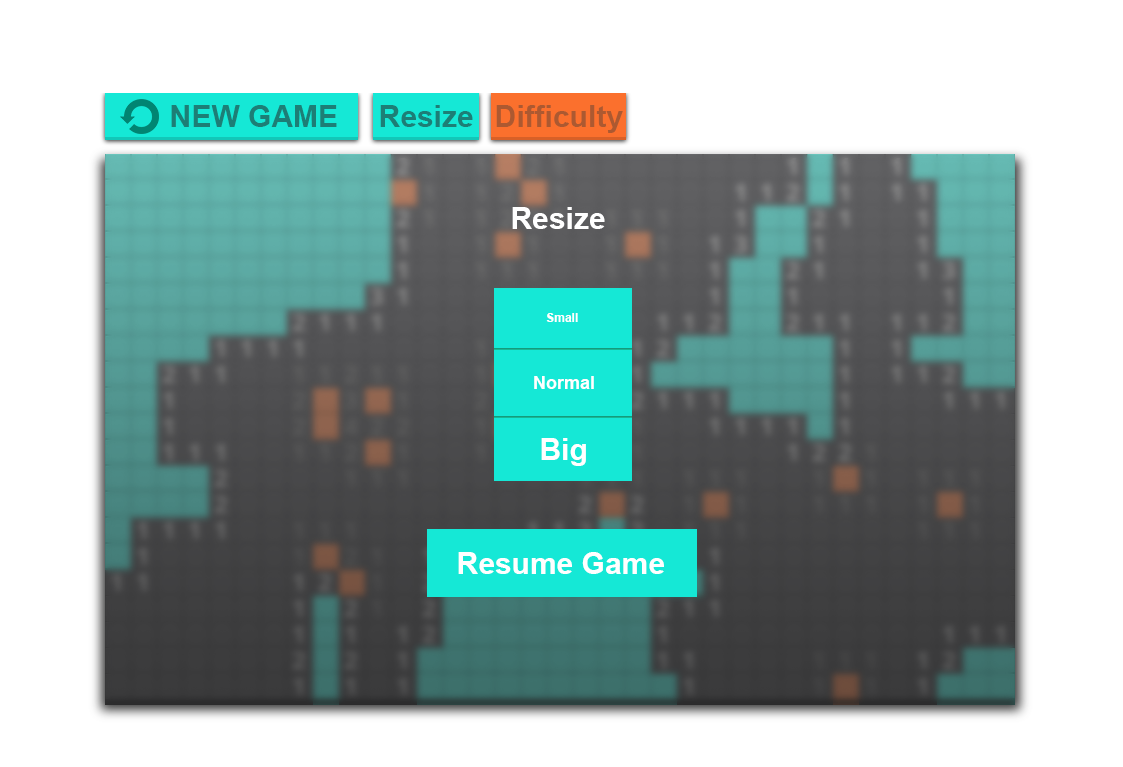
<style>
.page{position:relative;width:1123px;height:767px;background:#ffffff}
.page>*{position:absolute;margin:0}
.t1{font:30px "Arial-BoldMT";color:#1d7e76}
.t2{font:30px "Arial-BoldMT";color:#ac5931}
.t3{font:30px "Arial-BoldMT";color:#ffffff}
.t4{font:12px "Arial-BoldMT";color:#ffffff}
.t5{font:18px "Arial-BoldMT";color:#ffffff}
</style>
<div class="page">
<p class="t1" style="left:171px;top:105px;width:166px;height:22px">NEW GAME</p>
<p class="t1" style="left:380px;top:105px;width:93px;height:22px">Resize</p>
<p class="t2" style="left:496px;top:105px;width:127px;height:28px">Difficulty</p>
<p class="t3" style="left:512px;top:207px;width:93px;height:22px">Resize</p>
<p class="t4" style="left:546px;top:313px;width:32px;height:9px">Small</p>
<p class="t5" style="left:534px;top:376px;width:60px;height:13px">Normal</p>
<p class="t3" style="left:541px;top:438px;width:45px;height:28px">Big</p>
<p class="t3" style="left:458px;top:552px;width:206px;height:22px">Resume Game</p>
</div>
